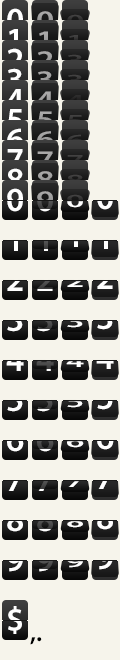
<style>
.page{position:relative;width:120px;height:660px;background:#f6f4eb}
.page>*{position:absolute;margin:0}
.t1{font:34px "MyriadPro-Semibold"}
.t2{font:25.5px "MyriadPro-Semibold";scale:1.33 1}
.t3{font:17px "MyriadPro-Semibold";color:#3d3d3d;scale:2 1}
.t4{font:34px "MyriadPro-Semibold";color:#ffffff}
.t5{font:17px "MyriadPro-Semibold";scale:2 1}
.t6{font:17px "MyriadPro-Semibold";color:#ffffff;scale:2 1}
.t7{font:26px "MyriadPro-Semibold";color:#000000}
</style>
<div class="page">
<p class="t1" style="left:7px;top:8px;width:16px;height:24px">0</p>
<p class="t2" style="left:37px;top:11px;width:16px;height:18px">0</p>
<p class="t3" style="left:67px;top:14px;width:16px;height:13px">0</p>
<p class="t4" style="left:9px;top:29px;width:9px;height:22px">1</p>
<p class="t2" style="left:39px;top:31px;width:9px;height:17px">1</p>
<p class="t3" style="left:69px;top:35px;width:9px;height:11px">1</p>
<p class="t1" style="left:7px;top:48px;width:16px;height:23px">2</p>
<p class="t2" style="left:37px;top:51px;width:16px;height:17px">2</p>
<p class="t3" style="left:67px;top:54px;width:16px;height:13px">3</p>
<p class="t1" style="left:7px;top:68px;width:16px;height:24px">3</p>
<p class="t2" style="left:37px;top:71px;width:16px;height:18px">3</p>
<p class="t3" style="left:67px;top:74px;width:16px;height:13px">3</p>
<p class="t1" style="left:6px;top:89px;width:18px;height:22px">4</p>
<p class="t2" style="left:36px;top:91px;width:18px;height:17px">4</p>
<p class="t1" style="left:7px;top:109px;width:16px;height:23px">5</p>
<p class="t2" style="left:37px;top:111px;width:16px;height:18px">5</p>
<p class="t3" style="left:67px;top:115px;width:16px;height:12px">5</p>
<p class="t1" style="left:7px;top:128px;width:17px;height:24px">6</p>
<p class="t2" style="left:37px;top:131px;width:17px;height:18px">6</p>
<p class="t3" style="left:67px;top:134px;width:17px;height:13px">6</p>
<p class="t4" style="left:7px;top:149px;width:16px;height:22px">7</p>
<p class="t2" style="left:37px;top:151px;width:16px;height:17px">7</p>
<p class="t1" style="left:7px;top:168px;width:16px;height:24px">8</p>
<p class="t2" style="left:37px;top:171px;width:16px;height:18px">8</p>
<p class="t3" style="left:67px;top:174px;width:16px;height:13px">8</p>
<p class="t4" style="left:7px;top:188px;width:16px;height:24px">0</p>
<p class="t4" style="left:7px;top:188px;width:16px;height:24px">9</p>
<p class="t1" style="left:37px;top:188px;width:16px;height:24px">0</p>
<p class="t2" style="left:37px;top:191px;width:16px;height:18px">9</p>
<p class="t5" style="left:67px;top:195px;width:16px;height:13px">0</p>
<p class="t4" style="left:97px;top:186px;width:16px;height:24px">0</p>
<p class="t4" style="left:9px;top:229px;width:9px;height:22px">1</p>
<p class="t4" style="left:99px;top:227px;width:9px;height:22px">1</p>
<p class="t6" style="left:69px;top:236px;width:9px;height:11px">1</p>
<p class="t4" style="left:7px;top:268px;width:16px;height:23px">2</p>
<p class="t4" style="left:97px;top:266px;width:16px;height:23px">2</p>
<p class="t6" style="left:67px;top:275px;width:16px;height:12px">2</p>
<p class="t4" style="left:7px;top:308px;width:16px;height:24px">3</p>
<p class="t4" style="left:7px;top:310px;width:16px;height:23px">2</p>
<p class="t4" style="left:37px;top:310px;width:16px;height:23px">2</p>
<p class="t6" style="left:67px;top:315px;width:16px;height:13px">3</p>
<p class="t4" style="left:97px;top:306px;width:16px;height:24px">3</p>
<p class="t4" style="left:6px;top:349px;width:18px;height:22px">4</p>
<p class="t6" style="left:66px;top:356px;width:18px;height:11px">4</p>
<p class="t4" style="left:7px;top:389px;width:16px;height:23px">5</p>
<p class="t4" style="left:97px;top:387px;width:16px;height:23px">5</p>
<p class="t6" style="left:67px;top:396px;width:16px;height:12px">5</p>
<p class="t4" style="left:7px;top:428px;width:17px;height:24px">6</p>
<p class="t6" style="left:67px;top:435px;width:17px;height:13px">6</p>
<p class="t4" style="left:97px;top:426px;width:17px;height:24px">6</p>
<p class="t4" style="left:7px;top:469px;width:16px;height:22px">7</p>
<p class="t4" style="left:37px;top:469px;width:16px;height:22px">7</p>
<p class="t4" style="left:97px;top:467px;width:16px;height:22px">7</p>
<p class="t6" style="left:67px;top:476px;width:16px;height:11px">7</p>
<p class="t4" style="left:7px;top:508px;width:16px;height:24px">8</p>
<p class="t4" style="left:97px;top:506px;width:16px;height:24px">8</p>
<p class="t6" style="left:67px;top:515px;width:16px;height:13px">8</p>
<p class="t1" style="left:97px;top:512px;width:16px;height:22px">7</p>
<p class="t4" style="left:7px;top:548px;width:16px;height:24px">9</p>
<p class="t6" style="left:67px;top:555px;width:16px;height:13px">9</p>
<p class="t4" style="left:97px;top:546px;width:16px;height:24px">9</p>
<p class="t4" style="left:8px;top:606px;width:14px;height:28px">$</p>
<p class="t7" style="left:30px;top:637px;width:6px;height:8px">,</p>
<p class="t7" style="left:37px;top:637px;width:5px;height:5px">.</p>
</div>
